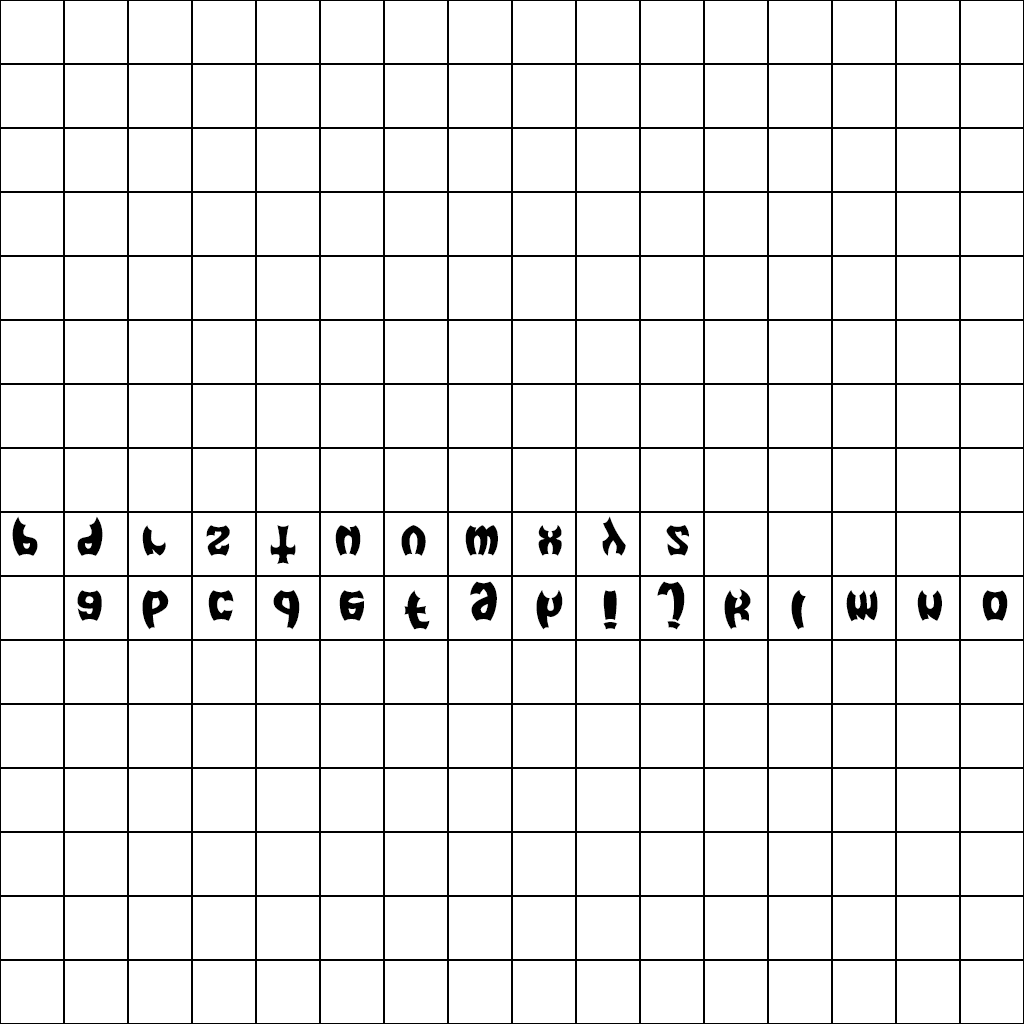
<style>
.page{position:relative;width:1024px;height:1024px;background:#ffffff}
.page>*{position:absolute;margin:0}
.t1{font:48px "BAT-MEN__G";color:#000000}
</style>
<div class="page">
<p class="t1" style="left:12px;top:516px;width:677px;height:48px">p   q   r   s   t   u   v   w   x   y   z</p>
<p class="t1" style="left:77px;top:581px;width:931px;height:49px">a   b   c   d   e   f   g   h   i   j   k   l   m   n   o</p>
</div>
